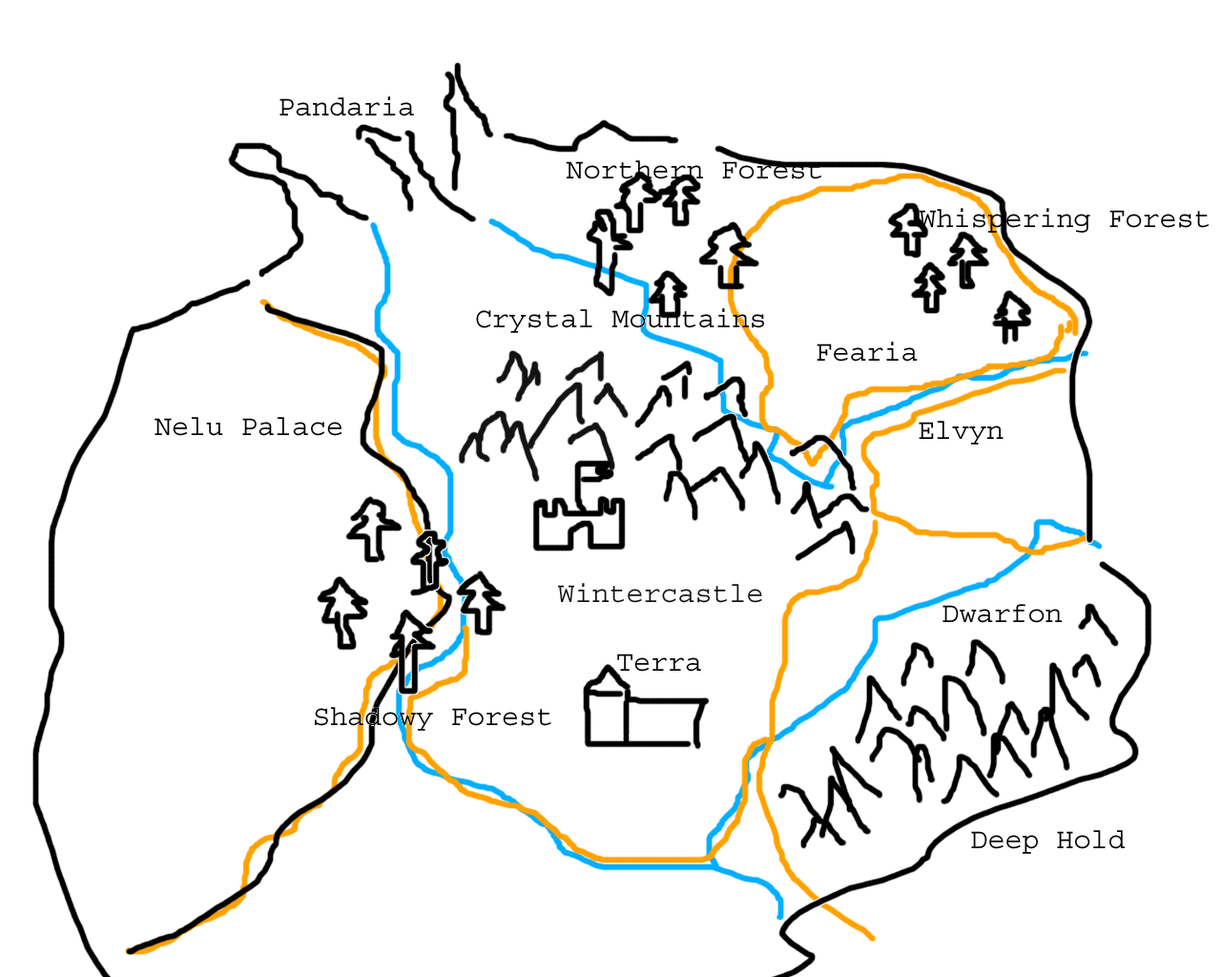
<style>
.page{position:relative;width:1221px;height:977px;background:#ffffff}
.page>*{position:absolute;margin:0}
.t1{font:28.6px "Courier";color:#000000}
.t2{font:28.6px "Courier";color:#121312}
</style>
<div class="page">
<p class="t1" style="left:279px;top:96px;width:135px;height:20px">Pandaria</p>
<p class="t1" style="left:566px;top:160px;width:255px;height:19px">Northern Forest</p>
<p class="t1" style="left:919px;top:208px;width:289px;height:25px">Whispering Forest</p>
<p class="t1" style="left:476px;top:308px;width:288px;height:25px">Crystal Mountains</p>
<p class="t1" style="left:816px;top:341px;width:102px;height:20px">Fearia</p>
<p class="t1" style="left:155px;top:417px;width:187px;height:19px">Nelu Palace</p>
<p class="t1" style="left:919px;top:421px;width:84px;height:23px">Elvyn</p>
<p class="t2" style="left:558px;top:583px;width:204px;height:20px">Wintercastle</p>
<p class="t1" style="left:942px;top:604px;width:120px;height:19px">Dwarfon</p>
<p class="t1" style="left:617px;top:653px;width:84px;height:18px">Terra</p>
<p class="t1" style="left:315px;top:707px;width:236px;height:24px">Shadowy Forest</p>
<p class="t1" style="left:971px;top:830px;width:154px;height:24px">Deep Hold</p>
</div>
